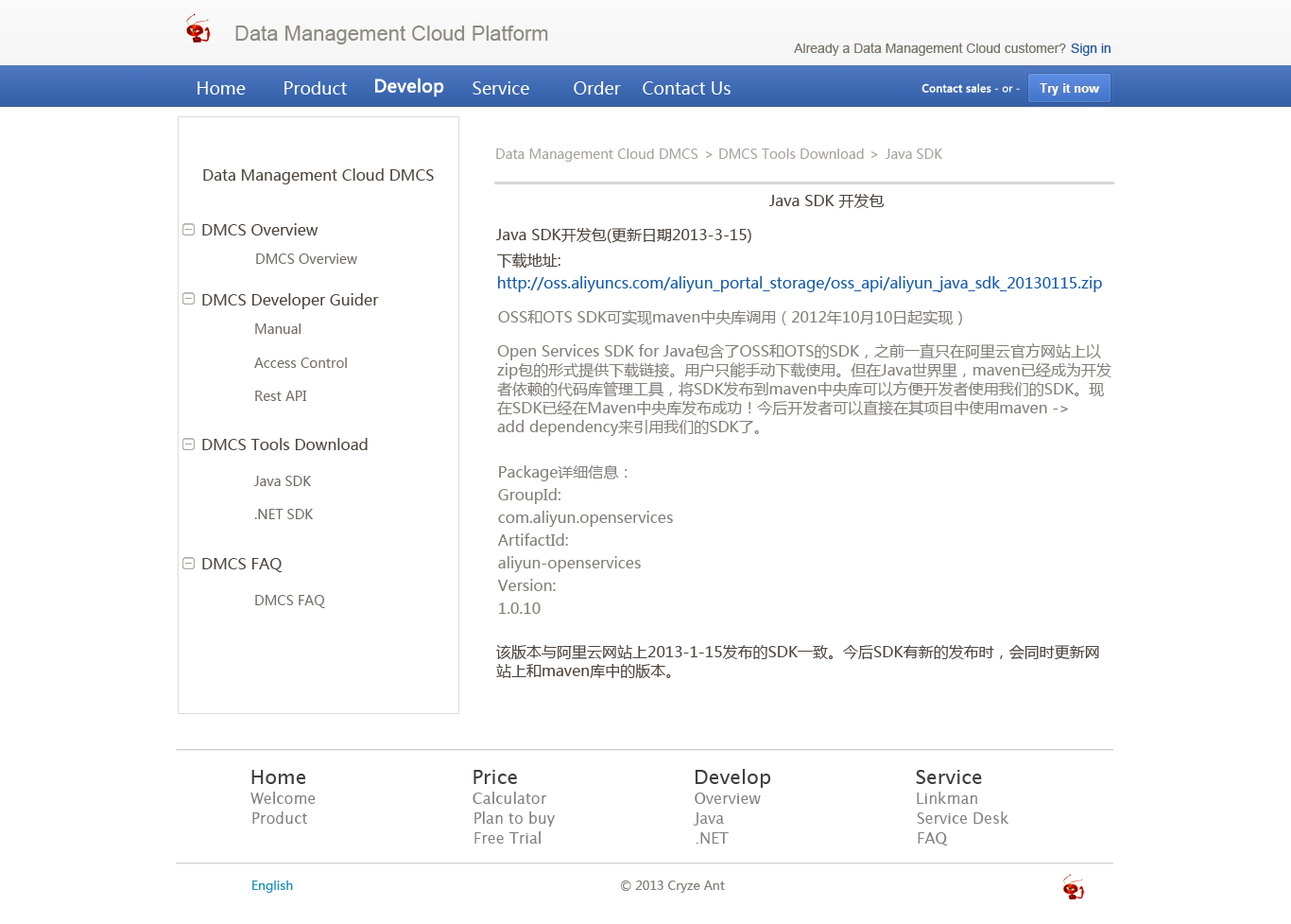
<style>
.page{position:relative;width:1291px;height:924px;background:#ffffff}
.page>*{position:absolute;margin:0}
.t1{font:20.8px "ArialMT";color:#8e8b82}
.t2{font:13.2px "ArialMT";color:#77746b}
.t3{font:13.2px "ArialMT";color:#225799}
.t4{font:17px "MicrosoftYaHei";color:#ffffff;font-weight:bold}
.t5{font:17px "MicrosoftYaHei";color:#ffffff}
.t6{font:10.4px "MicrosoftYaHei";color:#ffffff;font-weight:bold}
.t7{font:10.4px "MicrosoftYaHei";color:#ffffff}
.t8{font:13.2px "MicrosoftYaHei";color:#a7a19d}
.t9{font:15.1px "MicrosoftYaHei";color:#4e453e}
.t10{font:13.2px "MicrosoftYaHei";color:#736c67}
.t11{font:15.1px "MicrosoftYaHei";color:#165aab}
.t12{font:15.1px "MicrosoftYaHei";color:#827f7c}
.t13{font:15.1px/18.9px "MicrosoftYaHei";color:#827f7c}
.t14{font:15.1px/22.7px "MicrosoftYaHei";color:#827f7c}
.t15{font:15.1px/18.9px "MicrosoftYaHei";color:#4e453e}
.t16{font:19.9px "LucidaSans";color:#404040}
.t17{font:19.9px "LucidaSans";color:#3f3f3f}
.t18{font:15.1px "LucidaSans";color:#818181}
.t19{font:12.3px "MicrosoftYaHei";color:#1791b8}
.t20{font:12.3px "MicrosoftYaHei";color:#827f74}
</style>
<div class="page">
<p class="t1" style="left:235px;top:26px;width:313px;height:18px">Data Management Cloud Platform</p>
<p class="t2" style="left:794px;top:43px;width:272px;height:13px">Already a Data Management Cloud customer?</p>
<p class="t3" style="left:1071px;top:43px;width:40px;height:13px">Sign in</p>
<p class="t4" style="left:375px;top:78px;width:69px;height:19px">Develop</p>
<p class="t5" style="left:198px;top:81px;width:48px;height:14px">Home</p>
<p class="t5" style="left:285px;top:81px;width:62px;height:14px">Product</p>
<p class="t5" style="left:473px;top:81px;width:56px;height:14px">Service</p>
<p class="t5" style="left:574px;top:81px;width:47px;height:14px">Order</p>
<p class="t5" style="left:643px;top:81px;width:88px;height:14px">Contact Us</p>
<p class="t6" style="left:922px;top:83px;width:98px;height:10px">Contact sales<span class="t7"> - or -</span></p>
<p class="t8" style="left:496px;top:148px;width:203px;height:14px">Data Management Cloud DMCS</p>
<p class="t8" style="left:719px;top:148px;width:145px;height:11px">DMCS Tools Download</p>
<p class="t8" style="left:886px;top:148px;width:56px;height:11px">Java SDK</p>
<p class="t8" style="left:705px;top:151px;width:8px;height:7px">&gt;</p>
<p class="t8" style="left:871px;top:151px;width:7px;height:7px">&gt;</p>
<p class="t9" style="left:203px;top:168px;width:231px;height:16px">Data Management Cloud DMCS</p>
<p class="t9" style="left:769px;top:194px;width:116px;height:14px">Java SDK 开发包</p>
<p class="t9" style="left:202px;top:223px;width:117px;height:12px">DMCS Overview</p>
<p class="t9" style="left:496px;top:228px;width:255px;height:15px">Java SDK开发包(更新日期2013-3-15)</p>
<p class="t10" style="left:256px;top:253px;width:101px;height:11px">DMCS Overview</p>
<p class="t9" style="left:497px;top:252px;width:64px;height:16px">下载地址:</p>
<p class="t11" style="left:498px;top:276px;width:604px;height:16px">http://oss.aliyuncs.com/aliyun_portal_storage/oss_api/aliyun_java_sdk_20130115.zip</p>
<p class="t9" style="left:202px;top:293px;width:177px;height:16px">DMCS Developer Guider</p>
<p class="t12" style="left:498px;top:309px;width:464px;height:16px">OSS和OTS SDK可实现maven中央库调用（2012年10月10日起实现）</p>
<p class="t10" style="left:255px;top:323px;width:47px;height:11px">Manual</p>
<p class="t13" style="left:497px;top:343px;width:615px;height:93px">Open Services SDK for Java包含了OSS和OTS的SDK，之前一直只在阿里云官方网站上以<br>zip包的形式提供下载链接。用户只能手动下载使用。但在Java世界里，maven已经成为开发<br>者依赖的代码库管理工具，将SDK发布到maven中央库可以方便开发者使用我们的SDK。现<br>在SDK已经在Maven中央库发布成功！今后开发者可以直接在其项目中使用maven -&gt; <br>add dependency来引用我们的SDK了。</p>
<p class="t10" style="left:254px;top:357px;width:93px;height:11px">Access Control</p>
<p class="t10" style="left:255px;top:390px;width:52px;height:11px">Rest API</p>
<p class="t9" style="left:202px;top:438px;width:166px;height:12px">DMCS Tools Download</p>
<p class="t14" style="left:498px;top:464px;width:175px;height:149px">Package详细信息：<br>GroupId:<br>com.aliyun.openservices<br>ArtifactId:<br>aliyun-openservices<br>Version:<br>1.0.10</p>
<p class="t10" style="left:254px;top:475px;width:57px;height:11px">Java SDK</p>
<p class="t10" style="left:254px;top:509px;width:59px;height:10px">.NET SDK</p>
<p class="t9" style="left:202px;top:558px;width:80px;height:14px">DMCS FAQ</p>
<p class="t10" style="left:255px;top:595px;width:70px;height:13px">DMCS FAQ</p>
<p class="t15" style="left:496px;top:644px;width:603px;height:34px">该版本与阿里云网站上2013-1-15发布的SDK一致。今后SDK有新的发布时，会同时更新网<br>站上和maven库中的版本。</p>
<p class="t16" style="left:251px;top:769px;width:55px;height:15px">Home</p>
<p class="t17" style="left:474px;top:769px;width:43px;height:15px">Price</p>
<p class="t16" style="left:695px;top:768px;width:76px;height:19px">Develop</p>
<p class="t17" style="left:916px;top:769px;width:66px;height:15px">Service</p>
<p class="t18" style="left:250px;top:791px;width:66px;height:12px">Welcome</p>
<p class="t18" style="left:473px;top:791px;width:74px;height:12px">Calculator</p>
<p class="t18" style="left:695px;top:792px;width:66px;height:11px">Overview</p>
<p class="t18" style="left:917px;top:791px;width:60px;height:12px">Linkman</p>
<p class="t18" style="left:252px;top:811px;width:55px;height:12px">Product</p>
<p class="t18" style="left:475px;top:811px;width:80px;height:15px">Plan to buy</p>
<p class="t18" style="left:693px;top:812px;width:31px;height:13px">Java</p>
<p class="t18" style="left:917px;top:811px;width:92px;height:12px">Service Desk</p>
<p class="t18" style="left:475px;top:831px;width:66px;height:12px">Free Trial</p>
<p class="t18" style="left:696px;top:832px;width:33px;height:11px">.NET</p>
<p class="t18" style="left:918px;top:832px;width:30px;height:14px">FAQ</p>
<p class="t19" style="left:252px;top:880px;width:41px;height:12px">English</p>
<p class="t20" style="left:621px;top:880px;width:104px;height:12px">© 2013 Cryze Ant</p>
</div>
